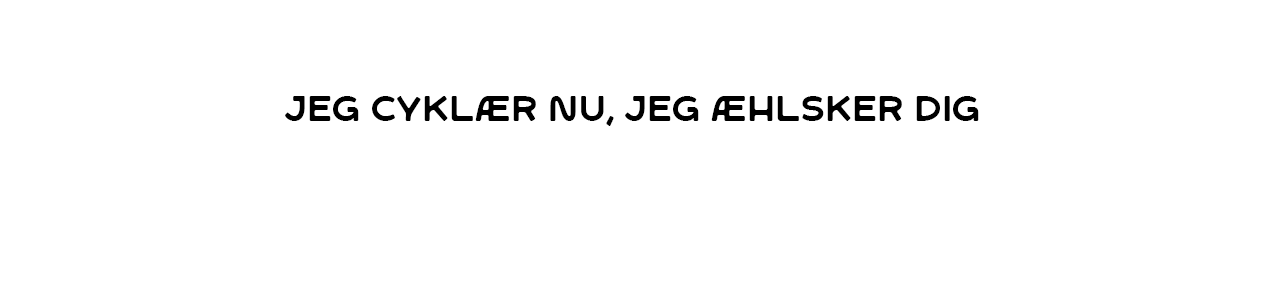
<style>
.page{position:relative;width:1268px;height:307px;background:#ffffff}
.page>*{position:absolute;margin:0}
.t1{font:35.4px "SFCWosterSans-Regular";letter-spacing:0.001em;color:#000000}
</style>
<div class="page">
<p class="t1" style="left:285px;top:96px;width:694px;height:30px">Jeg cyklær nu, jeg æhlsker dig</p>
</div>
